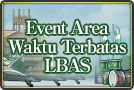
<style>
.page{position:relative;width:134px;height:90px}
.page>*{position:absolute;margin:0}
.t1{font:18px/19px "RyuminPro-ExBold";letter-spacing:-0.08em;color:#ffffff}
</style>
<div class="page">
<p class="t1" style="left:8px;top:20px;width:118px;height:53px;text-align:center">Event Area<br>Waktu Terbatas<br>LBAS</p>
</div>
